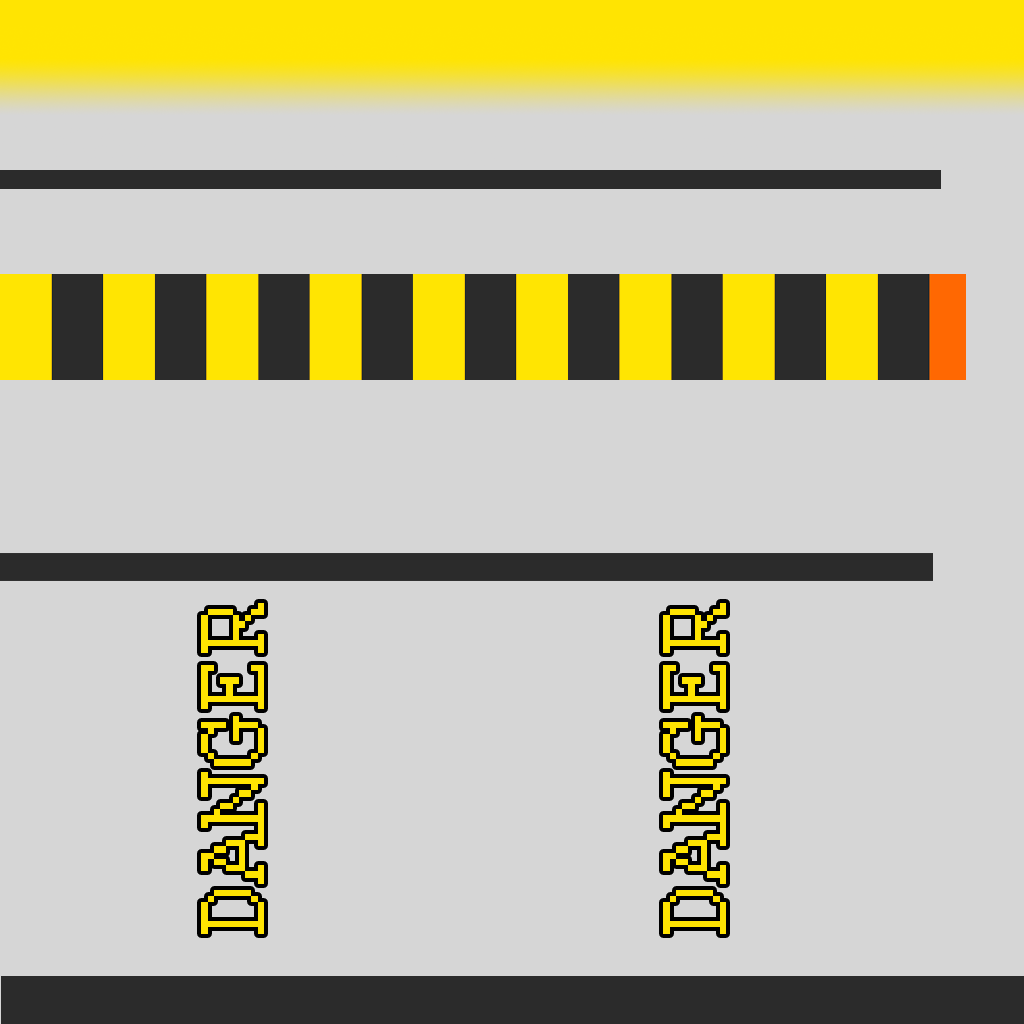
<style>
.page{position:relative;width:1024px;height:1024px;background:#d6d6d6}
.page>*{position:absolute;margin:0}
.t1{font:100px "Courier";color:#ffe402}
</style>
<div class="page">
<p class="t1" style="left:201px;top:603px;width:63px;height:331px;rotate:-90deg">DANGER</p>
<p class="t1" style="left:663px;top:603px;width:63px;height:331px;rotate:-90deg">DANGER</p>
</div>
